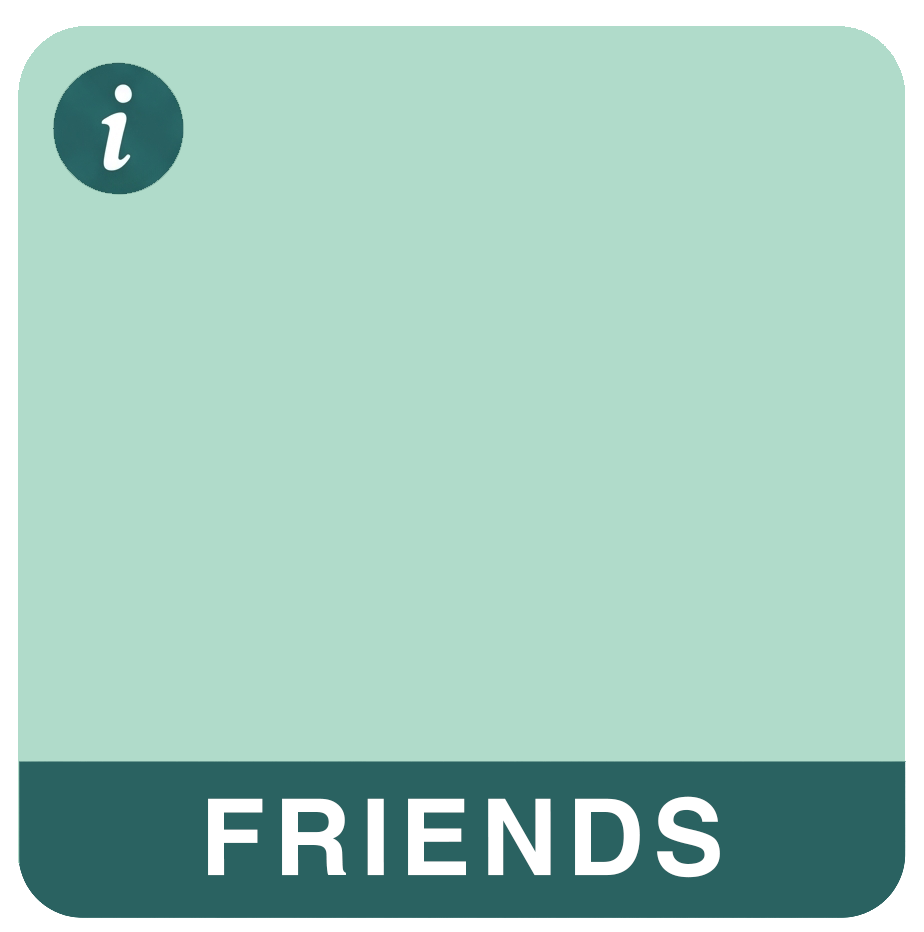
<style>
.page{position:relative;width:924px;height:932px;background:#b0dbca}
.page>*{position:absolute;margin:0}
.t1{font:122px "HacenAlgeriaBd";letter-spacing:0.08em;color:#ffffff}
</style>
<div class="page">
<p class="t1" style="left:208px;top:796px;width:512px;height:82px">FRIENDS</p>
</div>
